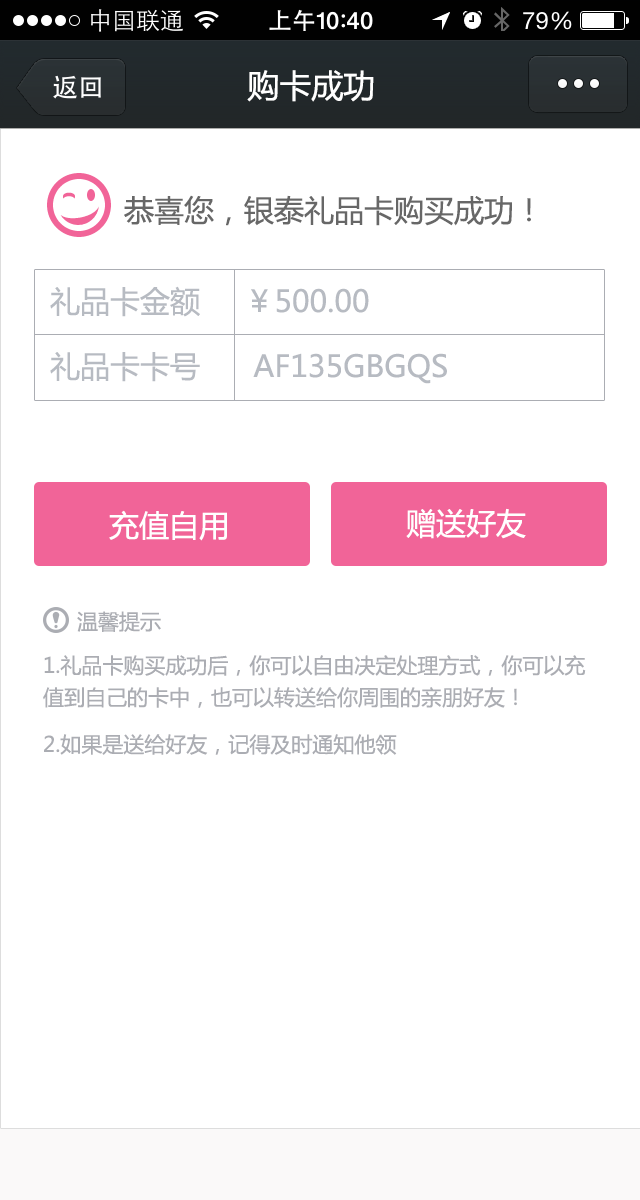
<style>
.page{position:relative;width:640px;height:1200px;background:#ffffff}
.page>*{position:absolute;margin:0}
.t1{font:32px "MicrosoftYaHei";color:#ffffff}
.t2{font:30px "MicrosoftYaHei";color:#676767}
.t3{font:30px "MicrosoftYaHei";color:#b7bbc2}
.t4{font:30px "MicrosoftYaHei";color:#ffffff}
.t5{font:21px "MicrosoftYaHei";color:#abadb3}
.t6{font:21px/32px "MicrosoftYaHei";color:#abadb3}
</style>
<div class="page">
<p class="t1" style="left:247px;top:70px;width:127px;height:32px">购卡成功</p>
<p class="t2" style="left:124px;top:195px;width:407px;height:31px">恭喜您，银泰礼品卡购买成功！</p>
<p class="t3" style="left:50px;top:286px;width:319px;height:31px">礼品卡金额     ￥500.00</p>
<p class="t3" style="left:50px;top:352px;width:397px;height:32px">礼品卡卡号      AF135GBGQS</p>
<p class="t4" style="left:109px;top:510px;width:118px;height:31px">充值自用</p>
<p class="t4" style="left:406px;top:508px;width:120px;height:31px">赠送好友</p>
<p class="t5" style="left:77px;top:611px;width:84px;height:21px">温馨提示</p>
<p class="t6" style="left:43px;top:655px;width:543px;height:53px">1.礼品卡购买成功后，你可以自由决定处理方式，你可以充值到自己的卡中，也可以转送给你周围的亲朋好友！</p>
<p class="t5" style="left:44px;top:734px;width:353px;height:21px">2.如果是送给好友，记得及时通知他领取哦！</p>
</div>
